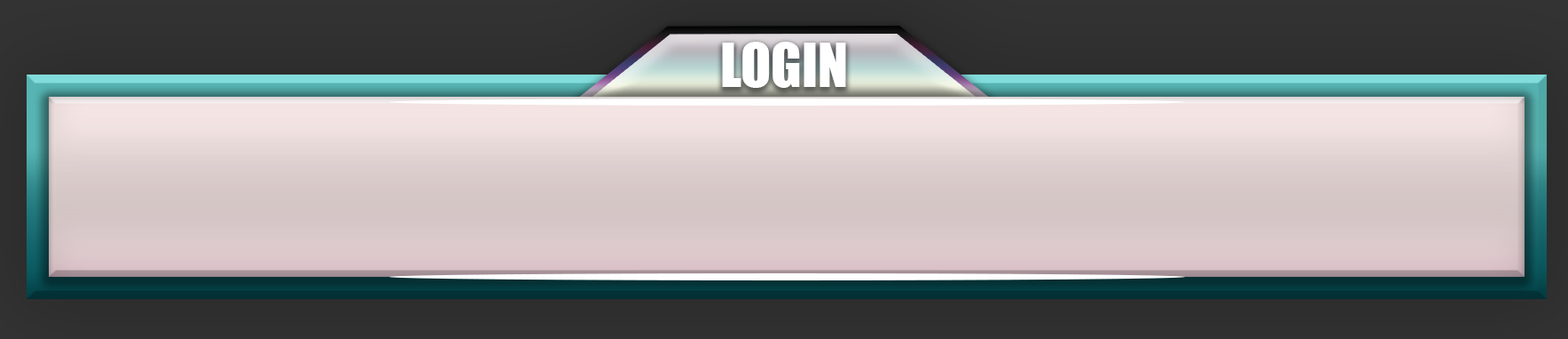
<style>
.page{position:relative;width:1568px;height:339px}
.page>*{position:absolute;margin:0}
.t1{font:55.4px "Impact";color:#ffffff}
</style>
<div class="page">
<p class="t1" style="left:722px;top:42px;width:124px;height:46px">LOGIN</p>
</div>
